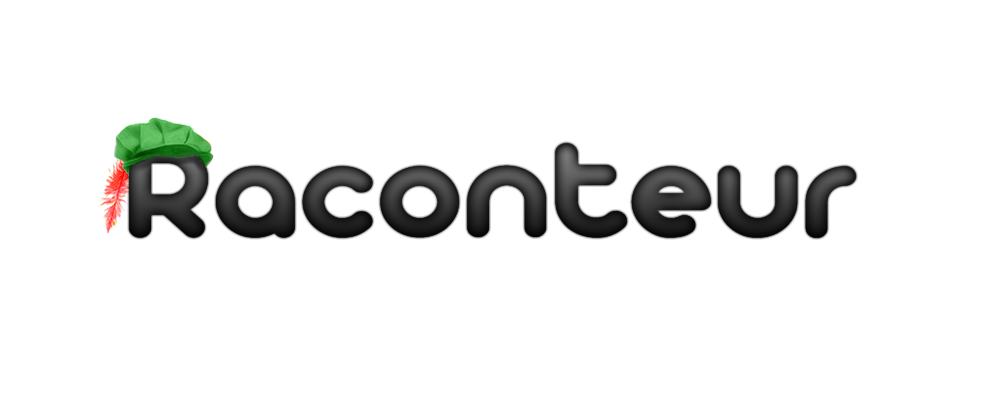
<style>
.page{position:relative;width:1000px;height:400px;background:#ffffff}
.page>*{position:absolute;margin:0}
.t1{font:147px "Arista2.0";scale:1.1 1}
</style>
<div class="page">
<p class="t1" style="left:129px;top:143px;width:727px;height:95px">Raconteur</p>
</div>
